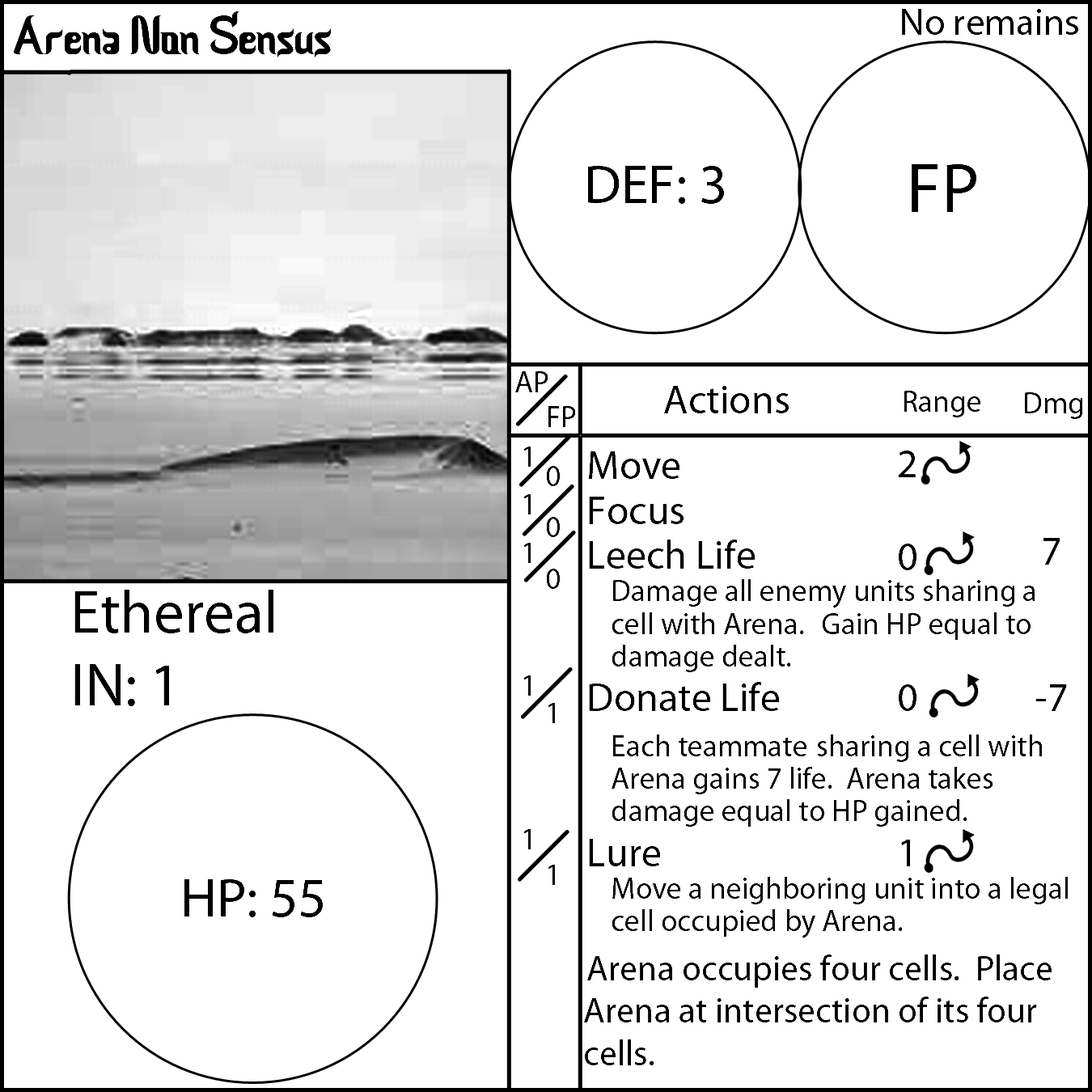
<style>
.page{position:relative;width:1092px;height:1092px;background:#ffffff}
.page>*{position:absolute;margin:0}
.t1{font:55.6px "CeriaLebaran";color:#000000}
.t2{font:37.9px "MyriadPro-Regular";color:#000000}
.t3{font:55.6px "MyriadPro-Regular";color:#000000}
.t4{font:70.8px "MyriadPro-Regular";color:#000000}
.t5{font:30.3px "MyriadPro-Regular";color:#000000}
.t6{font:40.4px "MyriadPro-Regular";color:#000000}
.t7{font:35.4px "MyriadPro-Regular";color:#000000}
.t8{font:60.7px "MyriadPro-Regular";color:#000000}
</style>
<div class="page">
<p class="t1" style="left:14px;top:11px;width:317px;height:49px">Arena Non Sensus</p>
<p class="t2" style="left:902px;top:9px;width:176px;height:26px">No remains</p>
<p class="t3" style="left:588px;top:166px;width:136px;height:38px">DEF: 3</p>
<p class="t4" style="left:912px;top:164px;width:64px;height:48px">FP</p>
<p class="t5" style="left:515px;top:371px;width:33px;height:21px">AP</p>
<p class="t6" style="left:664px;top:386px;width:125px;height:27px">Actions</p>
<p class="t5" style="left:904px;top:391px;width:77px;height:26px">Range</p>
<p class="t5" style="left:1024px;top:392px;width:59px;height:27px">Dmg</p>
<p class="t5" style="left:548px;top:406px;width:28px;height:21px">FP</p>
<p class="t5" style="left:523px;top:447px;width:8px;height:402px">1<br>1<br>1<br><br><br>1<br><br><br>1</p>
<p class="t5" style="left:584px;top:451px;width:484px;height:614px"><span class="t6">Move<br>Focus<br>Leech Life<br></span> Damage all enemy units sharing a <br> cell with Arena.  Gain HP equal to<br> damage dealt.<br><span class="t6">Donate Life<br></span> Each teammate sharing a cell with<br>  Arena gains 7 life.  Arena takes<br> damage equal to HP gained.<br><span class="t6">Lure<br></span> Move a neighboring unit into a legal<br> cell occupied by Arena.<br><span class="t7">Arena occupies four cells.  Place Arena at intersection of its four cells.</span></p>
<p class="t6" style="left:899px;top:451px;width:17px;height:415px;text-align:center">2<br> <br>0<br> <br><br>0<br><br><br>1</p>
<p class="t5" style="left:546px;top:466px;width:14px;height:419px">0<br>0<br>0<br><br>1<br><br><br>1</p>
<p class="t6" style="left:1035px;top:538px;width:32px;height:173px;text-align:center">7<br><br> <br>-7</p>
<p class="t8" style="left:74px;top:590px;width:199px;height:116px">Ethereal<br>IN: 1</p>
<p class="t3" style="left:184px;top:879px;width:139px;height:38px">HP: 55</p>
</div>
